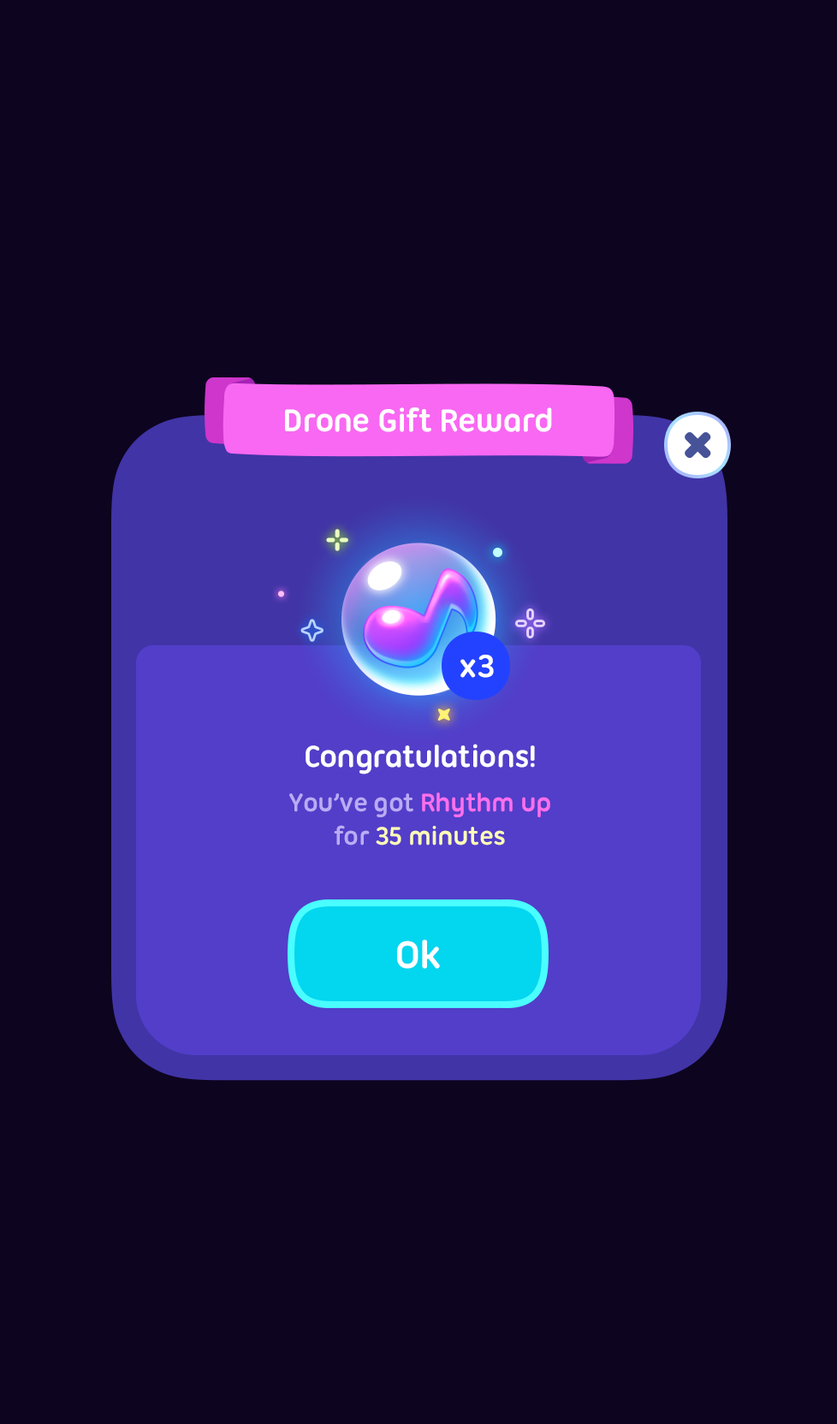
<style>
.page{position:relative;width:837px;height:1424px;background:#0d0420}
.page>*{position:absolute;margin:0}
.t1{font:34.2px "UbuntuTitling-Bold";letter-spacing:-0.025em;color:#ffffff}
.t2{font:32.5px "UbuntuTitling-Bold";letter-spacing:-0.025em;color:#ffffff}
.t3{font:27.4px "UbuntuTitling-Bold";letter-spacing:-0.025em;color:#bbabf4}
.t4{font:27.4px "UbuntuTitling-Bold";letter-spacing:-0.025em;color:#ff6fec}
.t5{font:27.4px "UbuntuTitling-Bold";letter-spacing:-0.025em;color:#fefbb7}
.t6{font:41.1px "UbuntuTitling-Bold";letter-spacing:-0.025em;color:#ffffff}
</style>
<div class="page">
<p class="t1" style="left:285px;top:407px;width:267px;height:25px">Drone Gift Reward</p>
<p class="t1" style="left:461px;top:655px;width:33px;height:23px">x3</p>
<p class="t2" style="left:306px;top:744px;width:229px;height:31px">Congratulations!</p>
<p class="t3" style="left:289px;top:793px;width:261px;height:53px;text-align:center">You’ve got <span class="t4">Rhythm up<br></span>for <span class="t5">35 minutes</span></p>
<p class="t6" style="left:397px;top:940px;width:43px;height:29px">Ok</p>
</div>
